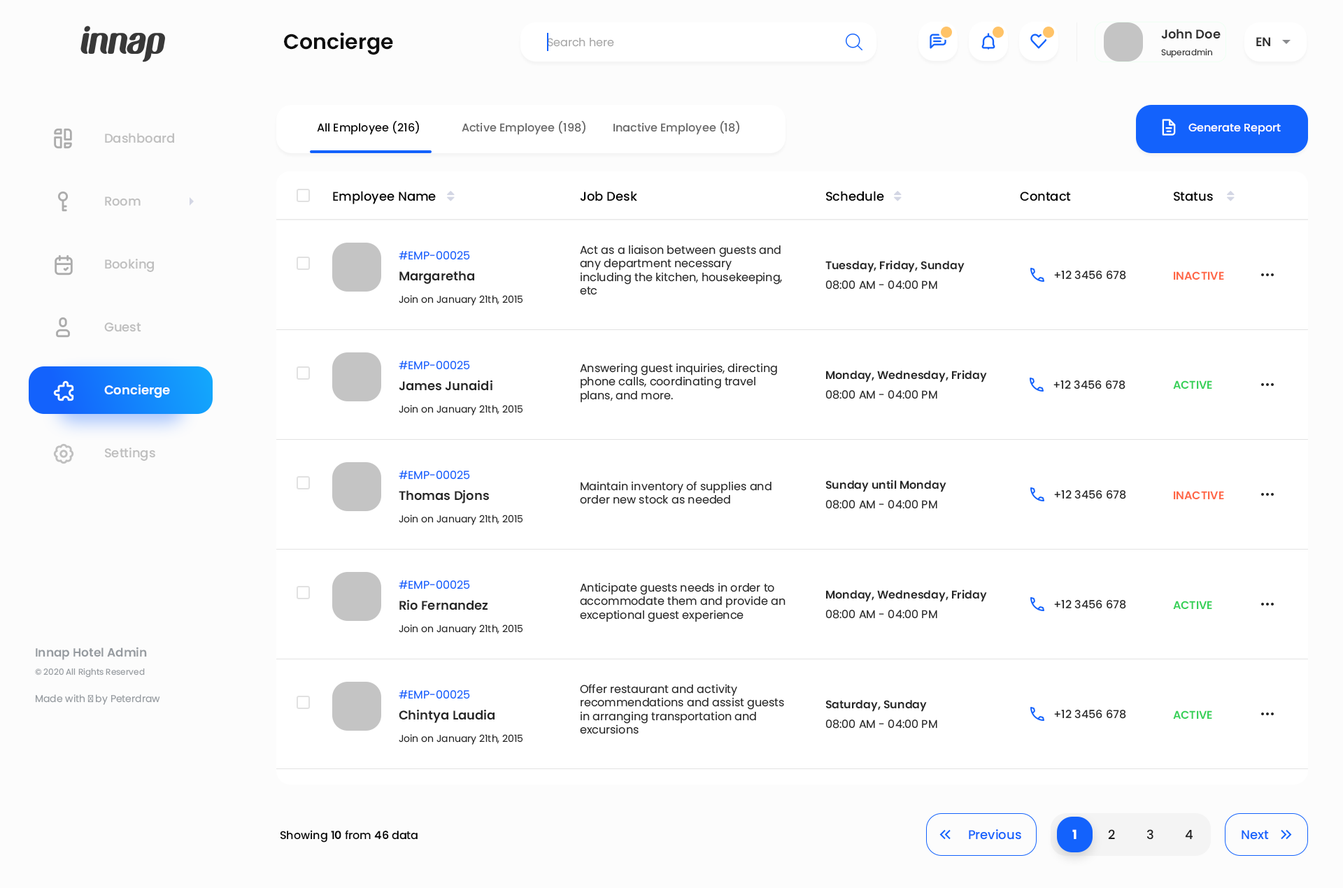
<style>
.page{position:relative;width:1343px;height:888px;background:#ffffff}
.page>*{position:absolute;margin:0}
.t1{font:12.6px "Poppins-SemiBold";color:#2e2e2e}
.t2{font:21px "Poppins-SemiBold";color:#0f0f0f}
.t3{font:11.2px "Poppins-Regular";color:#aaaaaa}
.t4{font:8.4px "Poppins-Regular";color:#2e2e2e}
.t5{font:11.2px "Poppins-Medium";color:#000000}
.t6{font:11.2px "Poppins-Medium";color:#666666}
.t7{font:11.2px "Poppins-Medium";color:#ffffff}
.t8{font:12.6px "Poppins-Medium";color:#bfbfbf}
.t9{font:12.6px "Poppins-Medium";color:#000000}
.t10{font:11.2px "Poppins-Regular";color:#262626}
.t11{font:11.2px "Poppins-Regular";color:#1362fc}
.t12{font:11.2px "Poppins-SemiBold";color:#262626}
.t13{font:12.6px "Poppins-SemiBold";color:#262626}
.t14{font:11.2px "Poppins-Medium";color:#262626}
.t15{font:11.2px "Poppins-SemiBold";color:#ff6746}
.t16{font:9.8px "Poppins-Regular";color:#262626}
.t17{font:12.6px "Poppins-SemiBold";color:#ffffff}
.t18{font:11.2px "Poppins-SemiBold";color:#37d159}
.t19{font:8.4px/18.2px "Poppins-Regular";color:#969ba0}
.t20{font:11.9px/18.2px "Poppins-SemiBold";color:#969ba0}
.t21{font:9.8px "Poppins-Regular";color:#969ba0}
.t22{font:11.2px "Poppins-SemiBold";color:#000000}
.t23{font:12.6px "Poppins-Medium";color:#1362fc}
.t24{font:12.6px "Poppins-Bold";color:#ffffff}
.t25{font:12.6px "Poppins-Medium";color:#202020}
</style>
<div class="page">
<p class="t1" style="left:1161px;top:29px;width:59px;height:10px">John Doe</p>
<p class="t2" style="left:284px;top:32px;width:109px;height:23px">Concierge</p>
<p class="t3" style="left:547px;top:38px;width:67px;height:9px">Search here</p>
<p class="t1" style="left:1256px;top:37px;width:14px;height:9px">EN</p>
<p class="t4" style="left:1161px;top:48px;width:51px;height:10px">Superadmin</p>
<p class="t5" style="left:317px;top:121px;width:102px;height:14px">All Employee (216)</p>
<p class="t6" style="left:462px;top:121px;width:123px;height:14px">Active Employee (198)</p>
<p class="t6" style="left:613px;top:121px;width:126px;height:14px">Inactive Employee (18)</p>
<p class="t7" style="left:1188px;top:123px;width:92px;height:12px">Generate Report</p>
<p class="t8" style="left:105px;top:133px;width:69px;height:10px">Dashboard</p>
<p class="t8" style="left:105px;top:197px;width:36px;height:9px">Room</p>
<p class="t9" style="left:333px;top:191px;width:103px;height:13px">Employee Name</p>
<p class="t9" style="left:580px;top:191px;width:57px;height:10px">Job Desk</p>
<p class="t9" style="left:826px;top:191px;width:58px;height:10px">Schedule</p>
<p class="t9" style="left:1020px;top:192px;width:51px;height:9px">Contact</p>
<p class="t9" style="left:1173px;top:192px;width:40px;height:9px">Status</p>
<p class="t10" style="left:580px;top:245px;width:202px;height:50px">Act as a liaison between guests and any department necessary including the kitchen, housekeeping, etc</p>
<p class="t11" style="left:399px;top:251px;width:71px;height:9px">#EMP-00025</p>
<p class="t8" style="left:105px;top:259px;width:49px;height:13px">Booking</p>
<p class="t12" style="left:825px;top:260px;width:139px;height:13px">Tuesday, Friday, Sunday</p>
<p class="t13" style="left:399px;top:271px;width:75px;height:13px">Margaretha</p>
<p class="t10" style="left:825px;top:280px;width:112px;height:10px">08:00 AM - 04:00 PM</p>
<p class="t14" style="left:1054px;top:271px;width:72px;height:9px">+12 3456 678</p>
<p class="t15" style="left:1173px;top:271px;width:51px;height:9px">INACTIVE</p>
<p class="t16" style="left:399px;top:295px;width:124px;height:11px">Join on January 21th, 2015</p>
<p class="t8" style="left:104px;top:322px;width:37px;height:10px">Guest</p>
<p class="t11" style="left:399px;top:361px;width:71px;height:9px">#EMP-00025</p>
<p class="t10" style="left:580px;top:363px;width:197px;height:40px">Answering guest inquiries, directing phone calls, coordinating travel plans, and more.</p>
<p class="t12" style="left:826px;top:370px;width:161px;height:13px">Monday, Wednesday, Friday</p>
<p class="t17" style="left:104px;top:385px;width:66px;height:13px">Concierge</p>
<p class="t13" style="left:399px;top:380px;width:93px;height:11px">James Junaidi</p>
<p class="t14" style="left:1053px;top:380px;width:72px;height:10px">+12 3456 678</p>
<p class="t18" style="left:1173px;top:380px;width:39px;height:9px">ACTIVE</p>
<p class="t10" style="left:825px;top:390px;width:112px;height:9px">08:00 AM - 04:00 PM</p>
<p class="t16" style="left:399px;top:405px;width:124px;height:10px">Join on January 21th, 2015</p>
<p class="t8" style="left:105px;top:448px;width:50px;height:13px">Settings</p>
<p class="t11" style="left:399px;top:471px;width:71px;height:9px">#EMP-00025</p>
<p class="t10" style="left:580px;top:481px;width:191px;height:23px">Maintain inventory of supplies and order new stock as needed</p>
<p class="t12" style="left:825px;top:480px;width:121px;height:12px">Sunday until Monday</p>
<p class="t13" style="left:399px;top:490px;width:90px;height:13px">Thomas Djons</p>
<p class="t14" style="left:1054px;top:490px;width:72px;height:9px">+12 3456 678</p>
<p class="t15" style="left:1173px;top:491px;width:51px;height:8px">INACTIVE</p>
<p class="t10" style="left:825px;top:500px;width:112px;height:9px">08:00 AM - 04:00 PM</p>
<p class="t16" style="left:399px;top:515px;width:124px;height:10px">Join on January 21th, 2015</p>
<p class="t11" style="left:399px;top:580px;width:71px;height:10px">#EMP-00025</p>
<p class="t10" style="left:580px;top:583px;width:205px;height:39px">Anticipate guests needs in order to accommodate them and provide an exceptional guest experience</p>
<p class="t12" style="left:826px;top:590px;width:161px;height:12px">Monday, Wednesday, Friday</p>
<p class="t13" style="left:399px;top:600px;width:88px;height:10px">Rio Fernandez</p>
<p class="t14" style="left:1054px;top:600px;width:72px;height:9px">+12 3456 678</p>
<p class="t18" style="left:1173px;top:601px;width:39px;height:8px">ACTIVE</p>
<p class="t10" style="left:825px;top:610px;width:112px;height:9px">08:00 AM - 04:00 PM</p>
<p class="t16" style="left:399px;top:624px;width:124px;height:11px">Join on January 21th, 2015</p>
<p class="t19" style="left:35px;top:647px;width:112px;height:31px"><span class="t20">Innap Hotel Admin<br></span>© 2020 All Rights Reserved</p>
<p class="t10" style="left:580px;top:684px;width:204px;height:50px">Offer restaurant and activity recommendations and assist guests in arranging transportation and excursions</p>
<p class="t21" style="left:36px;top:694px;width:124px;height:11px">Made with ♥ by Peterdraw</p>
<p class="t11" style="left:399px;top:690px;width:71px;height:9px">#EMP-00025</p>
<p class="t12" style="left:825px;top:700px;width:102px;height:12px">Saturday, Sunday</p>
<p class="t13" style="left:399px;top:710px;width:95px;height:13px">Chintya Laudia</p>
<p class="t14" style="left:1054px;top:710px;width:72px;height:9px">+12 3456 678</p>
<p class="t18" style="left:1173px;top:710px;width:39px;height:9px">ACTIVE</p>
<p class="t10" style="left:825px;top:720px;width:112px;height:9px">08:00 AM - 04:00 PM</p>
<p class="t16" style="left:399px;top:734px;width:124px;height:11px">Join on January 21th, 2015</p>
<p class="t5" style="left:280px;top:830px;width:137px;height:13px">Showing <span class="t22">10 </span>from <span class="t22">46 </span>data</p>
<p class="t23" style="left:969px;top:829px;width:52px;height:11px">Previous</p>
<p class="t24" style="left:1072px;top:829px;width:4px;height:10px">1</p>
<p class="t25" style="left:1108px;top:829px;width:7px;height:10px">2</p>
<p class="t25" style="left:1146px;top:829px;width:7px;height:11px">3</p>
<p class="t25" style="left:1185px;top:829px;width:8px;height:11px">4</p>
<p class="t23" style="left:1241px;top:830px;width:28px;height:10px">Next</p>
</div>
